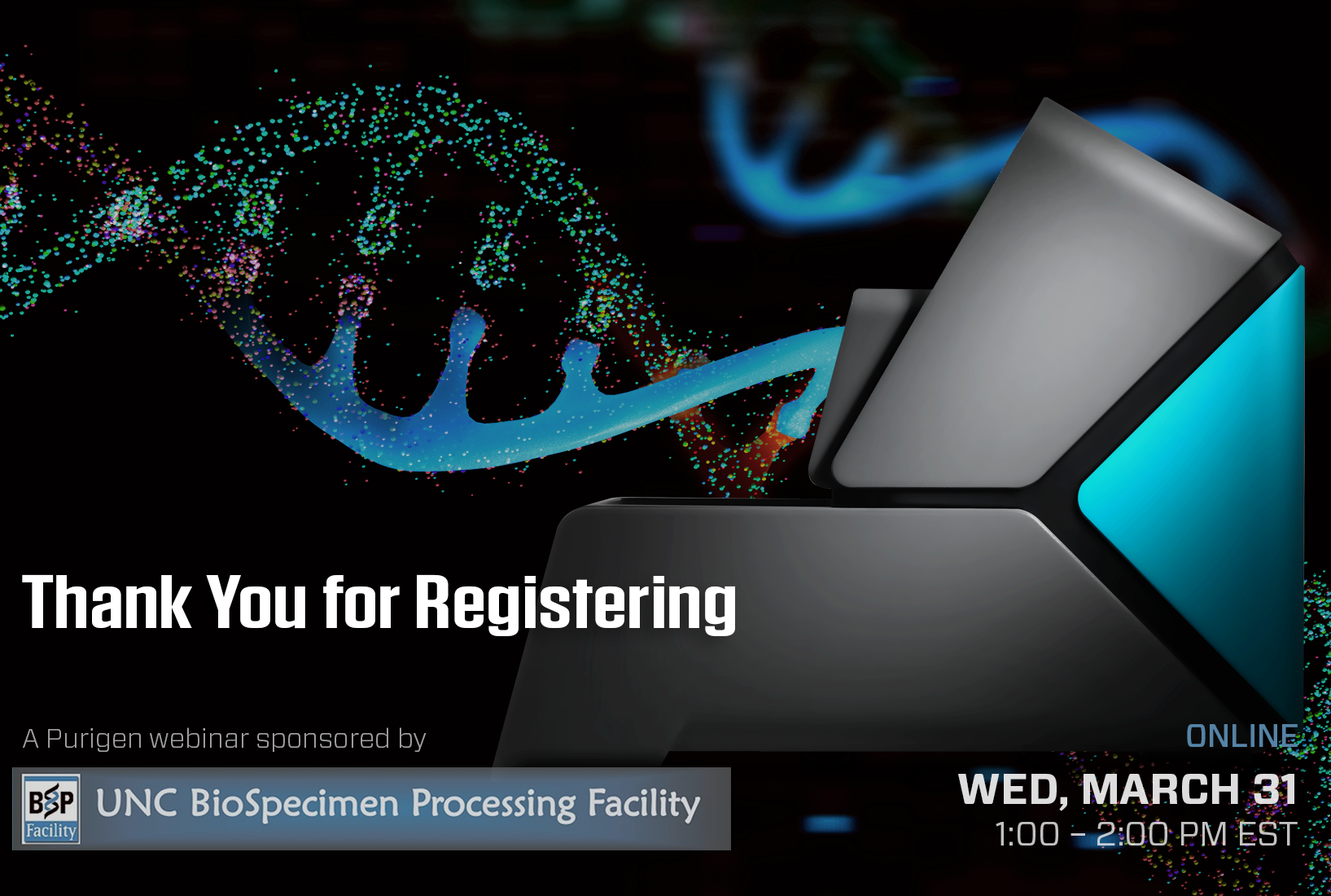
<style>
.page{position:relative;width:1331px;height:896px;background:#020000}
.page>*{position:absolute;margin:0}
.t1{font:74.6px "Tungsten-Semibold";color:#ffffff;scale:1.37 1}
.t2{font:31.9px "Forza-Medium";color:#5583a5;text-transform:uppercase}
.t3{font:27.1px "Forza-Light";color:#a4a3a3}
.t4{font:42.4px "Forza-Bold";color:#dddddd;text-transform:uppercase}
.t5{font:33.6px "Forza-Book";color:#c2c2c2;text-transform:uppercase}
</style>
<div class="page">
<p class="t1" style="left:22px;top:574px;width:713px;height:62px">Thank You for Registering</p>
<p class="t2" style="left:1187px;top:724px;width:111px;height:23px">Online</p>
<p class="t3" style="left:23px;top:727px;width:404px;height:25px">A Purigen webinar sponsored by</p>
<p class="t4" style="left:958px;top:774px;width:337px;height:37px">Wed, March 31</p>
<p class="t5" style="left:996px;top:822px;width:302px;height:23px">1:00 – 2:00 PM EST</p>
</div>
